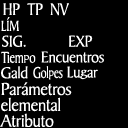
<style>
.page{position:relative;width:128px;height:128px;background:#000000}
.page>*{position:absolute;margin:0}
.t1{font:18px "BakerSignetBT-Roman";letter-spacing:-0.02em;color:#ffffff;scale:0.86 1}
.t2{font:15.5px "BakerSignetBT-Roman";letter-spacing:-0.02em;color:#ffffff;scale:0.84 1}
.t3{font:16.9px "BakerSignetBT-Roman";letter-spacing:-0.02em;color:#ffffff;scale:0.93 1}
.t4{font:16.9px "BakerSignetBT-Roman";letter-spacing:-0.02em;color:#ffffff;scale:0.77 1}
.t5{font:10.3px "BakerSignetBT-Roman";letter-spacing:-0.02em;color:#ffffff;scale:1.26 1}
.t6{font:16.9px "BakerSignetBT-Roman";letter-spacing:-0.02em;color:#ffffff;scale:0.96 1}
.t7{font:16.9px "BakerSignetBT-Roman";letter-spacing:-0.02em;color:#ffffff;scale:0.7 1}
.t8{font:12.2px "BakerSignetBT-Roman";letter-spacing:-0.02em;color:#ffffff}
.t9{font:16.7px "BakerSignetBT-Roman";letter-spacing:-0.02em;color:#ffffff;scale:0.94 1}
.t10{font:12.2px "BakerSignetBT-Roman";letter-spacing:-0.02em;color:#ffffff;scale:1.28 1}
.t11{font:18.5px/15.9px "BakerSignetBT-Roman";letter-spacing:-0.02em;color:#ffffff}
</style>
<div class="page">
<p class="t1" style="left:3px;top:3px;width:66px;height:13px">HP  TP  NV</p>
<p class="t2" style="left:1px;top:17px;width:18px;height:15px">LÍM</p>
<p class="t3" style="left:2px;top:35px;width:91px;height:12px">SIG.           EXP</p>
<p class="t4" style="left:1px;top:51px;width:35px;height:13px">Tiem<span class="t5">p</span>o</p>
<p class="t6" style="left:41px;top:51px;width:63px;height:12px">Encuentros</p>
<p class="t6" style="left:1px;top:66px;width:27px;height:13px">Gald</p>
<p class="t7" style="left:33px;top:66px;width:30px;height:14px">Gol<span class="t8">p</span>es</p>
<p class="t9" style="left:67px;top:66px;width:31px;height:14px">Lu<span class="t10">g</span>ar</p>
<p class="t11" style="left:0px;top:82px;width:72px;height:45px">Parámetros<br>elemental<br>Atributo</p>
</div>
